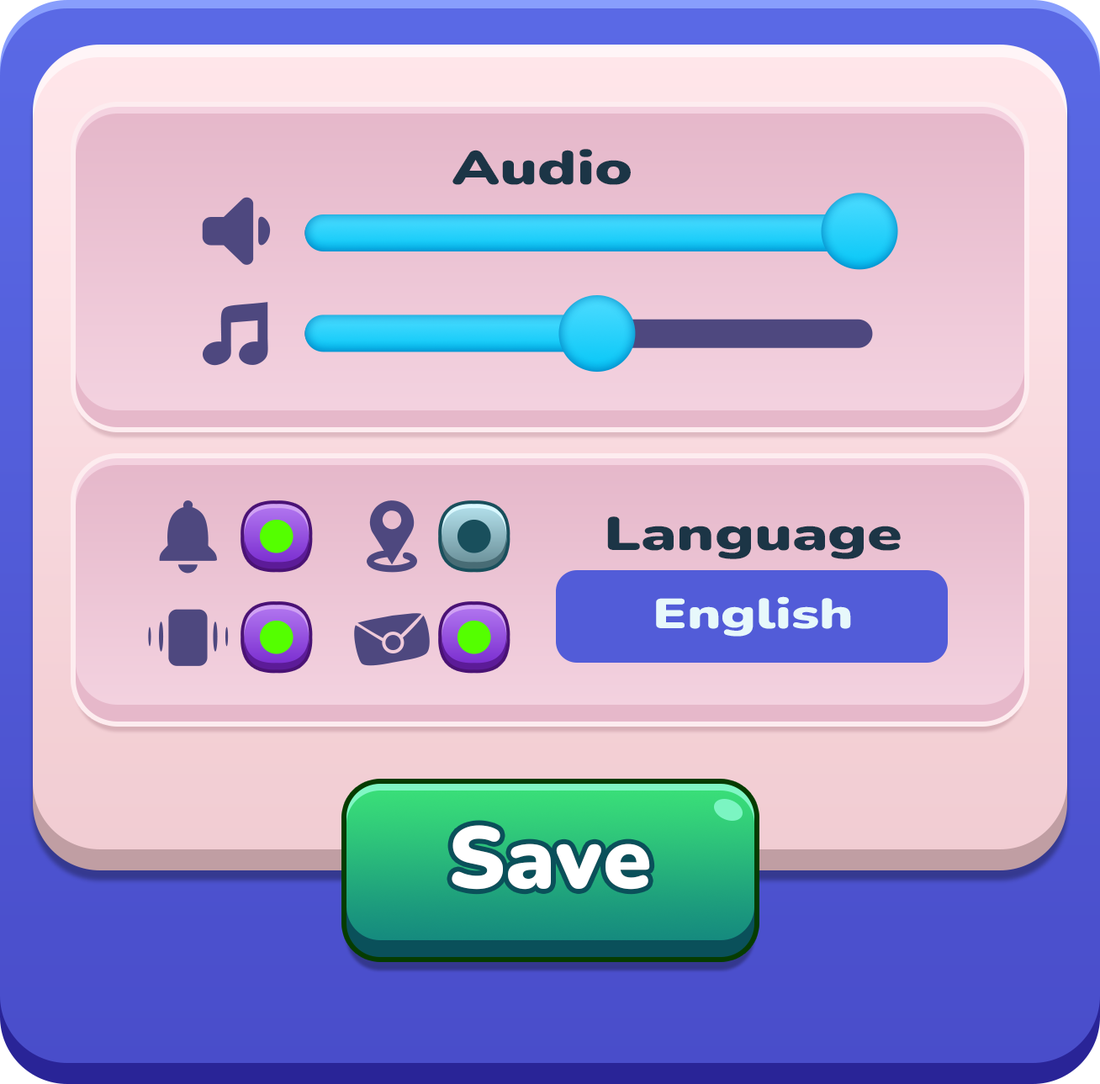
<style>
.page{position:relative;width:1100px;height:1084px}
.page>*{position:absolute;margin:0}
.t1{font:47.3px "Nunito-Black";color:#1c3546;scale:1.33 1}
.t2{font:42px "Nunito-Black";color:#e7f8fb;scale:1.33 1}
.t3{font:87.5px "Nunito-Black";color:#ffffff}
</style>
<div class="page">
<p class="t1" style="left:452px;top:149px;width:179px;height:36px">Audio</p>
<p class="t1" style="left:607px;top:516px;width:294px;height:43px">Language</p>
<p class="t2" style="left:656px;top:596px;width:195px;height:41px">English</p>
<p class="t3" style="left:452px;top:825px;width:198px;height:65px">Save</p>
</div>
